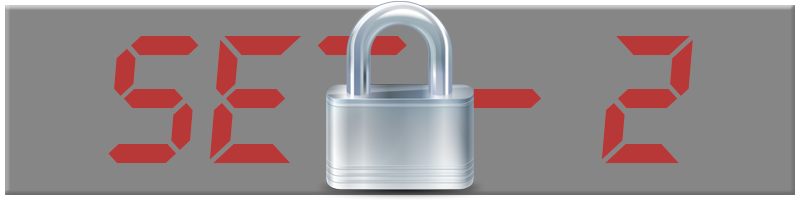
<style>
.page{position:relative;width:800px;height:200px;background:#868686}
.page>*{position:absolute;margin:0}
.t1{font:200px "LetsgoDigital-Regular";color:#b83838}
</style>
<div class="page">
<p class="t1" style="left:108px;top:36px;width:585px;height:128px">SET - 2</p>
</div>
